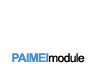
<style>
.page{position:relative;width:96px;height:64px;background:#ffffff}
.page>*{position:absolute;margin:0}
.t1{font:12px "Arial-BoldMT";letter-spacing:-0.05em;color:#448fd2}
.t2{font:12px "ArialMT";letter-spacing:-0.05em;color:#000000}
</style>
<div class="page">
<p class="t1" style="left:12px;top:53px;width:73px;height:10px">PAIMEI<span class="t2">module</span></p>
</div>
